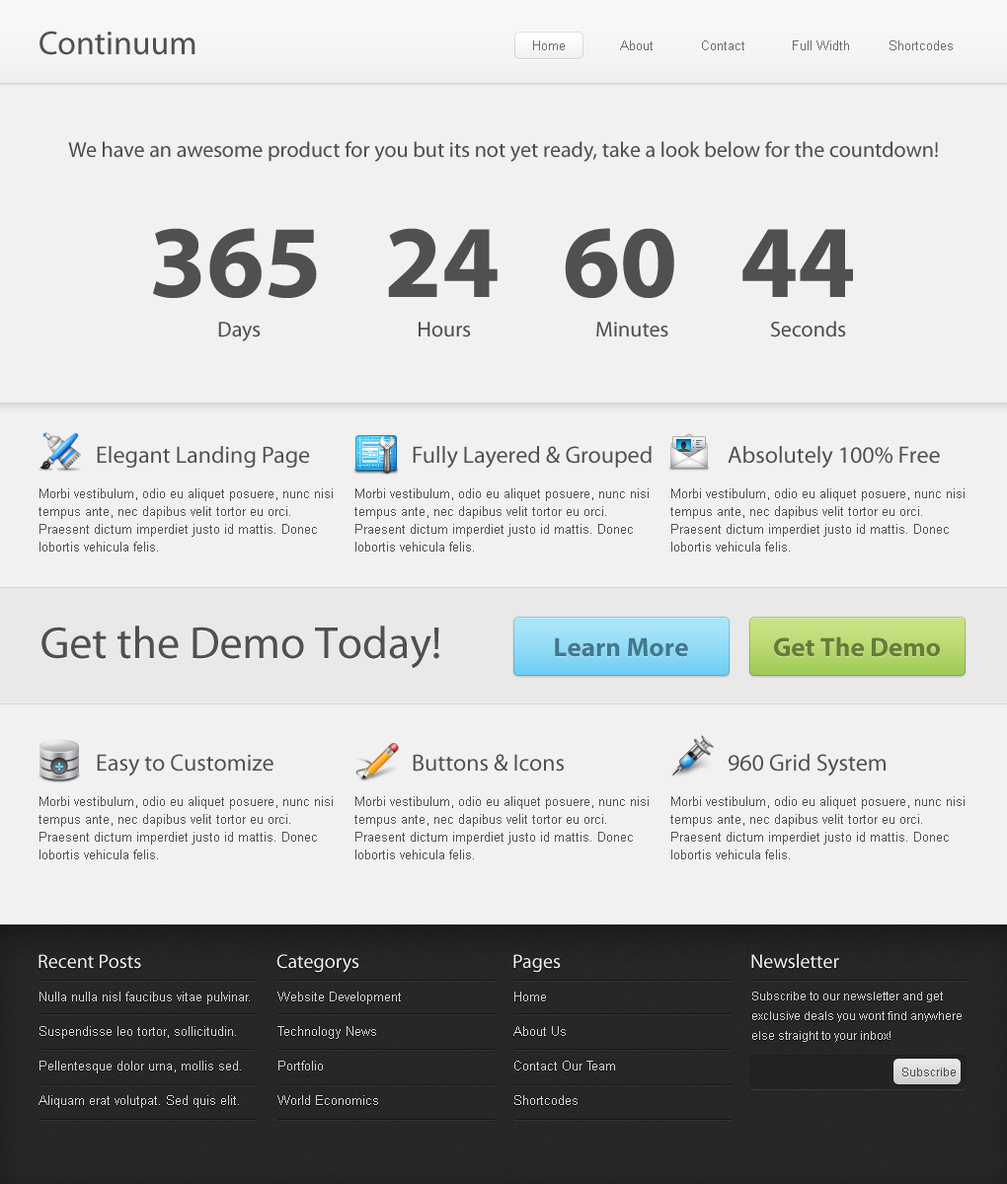
<style>
.page{position:relative;width:1007px;height:1184px;background:#f1f1f1}
.page>*{position:absolute;margin:0}
.t1{font:33.6px "MyriadPro-Regular";color:#505050}
.t2{font:12.8px "ArialMT";color:#6c6c6c}
.t3{font:21.7px "MyriadPro-Regular";color:#505050}
.t4{font:103.6px "MyriadPro-Bold";color:#505050}
.t5{font:23.7px "MyriadPro-Regular";color:#505050}
.t6{font:12.8px/17.8px "ArialMT";color:#505050}
.t7{font:45.4px "MyriadPro-Regular";color:#505050}
.t8{font:26.6px "MyriadPro-Bold";color:#42788e}
.t9{font:26.6px "MyriadPro-Bold";color:#647e38}
.t10{font:19.7px "MyriadPro-Regular";color:#f1f1f1}
.t11{font:12.8px "ArialMT";color:#d7d7d7}
.t12{font:11.8px/19.7px "ArialMT";color:#d7d7d7}
.t13{font:11.8px "ArialMT";color:#4a4a4a}
</style>
<div class="page">
<p class="t1" style="left:39px;top:31px;width:156px;height:24px">Continuum</p>
<p class="t2" style="left:533px;top:40px;width:32px;height:10px">Home</p>
<p class="t2" style="left:620px;top:40px;width:32px;height:10px">About</p>
<p class="t2" style="left:702px;top:40px;width:42px;height:10px">Contact</p>
<p class="t2" style="left:793px;top:40px;width:56px;height:10px">Full Width</p>
<p class="t2" style="left:889px;top:40px;width:63px;height:10px">Shortcodes</p>
<p class="t3" style="left:68px;top:141px;width:870px;height:21px">We have an awesome product for you but its not yet ready, take a look below for the countdown!</p>
<p class="t4" style="left:153px;top:228px;width:700px;height:70px">365   24   60   44</p>
<p class="t3" style="left:218px;top:321px;width:628px;height:21px">Days                                  Hours                           Minutes                      Seconds</p>
<p class="t5" style="left:97px;top:446px;width:213px;height:22px">Elegant Landing Page</p>
<p class="t5" style="left:413px;top:446px;width:238px;height:23px">Fully Layered &amp; Grouped</p>
<p class="t5" style="left:727px;top:446px;width:213px;height:23px">Absolutely 100% Free</p>
<p class="t6" style="left:38px;top:489px;width:295px;height:63px">Morbi vestibulum, odio eu aliquet posuere, nunc nisi tempus ante, nec dapibus velit tortor eu orci. Praesent dictum imperdiet justo id mattis. Donec lobortis vehicula felis.</p>
<p class="t6" style="left:354px;top:489px;width:294px;height:63px">Morbi vestibulum, odio eu aliquet posuere, nunc nisi tempus ante, nec dapibus velit tortor eu orci. Praesent dictum imperdiet justo id mattis. Donec lobortis vehicula felis.</p>
<p class="t6" style="left:670px;top:489px;width:294px;height:63px">Morbi vestibulum, odio eu aliquet posuere, nunc nisi tempus ante, nec dapibus velit tortor eu orci. Praesent dictum imperdiet justo id mattis. Donec lobortis vehicula felis.</p>
<p class="t7" style="left:41px;top:626px;width:398px;height:42px">Get the Demo Today!</p>
<p class="t8" style="left:555px;top:638px;width:133px;height:19px">Learn More</p>
<p class="t9" style="left:774px;top:637px;width:166px;height:20px">Get The Demo</p>
<p class="t5" style="left:97px;top:754px;width:176px;height:23px">Easy to Customize</p>
<p class="t5" style="left:413px;top:754px;width:151px;height:18px">Buttons &amp; Icons</p>
<p class="t5" style="left:728px;top:754px;width:157px;height:23px">960 Grid System</p>
<p class="t6" style="left:38px;top:797px;width:295px;height:63px">Morbi vestibulum, odio eu aliquet posuere, nunc nisi tempus ante, nec dapibus velit tortor eu orci. Praesent dictum imperdiet justo id mattis. Donec lobortis vehicula felis.</p>
<p class="t6" style="left:354px;top:797px;width:294px;height:63px">Morbi vestibulum, odio eu aliquet posuere, nunc nisi tempus ante, nec dapibus velit tortor eu orci. Praesent dictum imperdiet justo id mattis. Donec lobortis vehicula felis.</p>
<p class="t6" style="left:670px;top:797px;width:294px;height:63px">Morbi vestibulum, odio eu aliquet posuere, nunc nisi tempus ante, nec dapibus velit tortor eu orci. Praesent dictum imperdiet justo id mattis. Donec lobortis vehicula felis.</p>
<p class="t10" style="left:751px;top:953px;width:88px;height:16px">Newsletter</p>
<p class="t10" style="left:38px;top:954px;width:103px;height:15px">Recent Posts</p>
<p class="t10" style="left:276px;top:954px;width:83px;height:19px">Categorys</p>
<p class="t10" style="left:513px;top:954px;width:48px;height:19px">Pages</p>
<p class="t11" style="left:39px;top:992px;width:211px;height:13px">Nulla nulla nisl faucibus vitae pulvinar.</p>
<p class="t11" style="left:277px;top:992px;width:124px;height:13px">Website Development</p>
<p class="t11" style="left:514px;top:992px;width:32px;height:10px">Home</p>
<p class="t12" style="left:752px;top:992px;width:209px;height:50px">Subscribe to our newsletter and get exclusive deals you wont find anywhere else straight to your inbox!</p>
<p class="t11" style="left:39px;top:1027px;width:197px;height:12px">Suspendisse leo tortor, sollicitudin.</p>
<p class="t11" style="left:277px;top:1027px;width:99px;height:12px">Technology News</p>
<p class="t11" style="left:513px;top:1027px;width:53px;height:9px">About Us</p>
<p class="t11" style="left:39px;top:1061px;width:202px;height:13px">Pellentesque dolor urna, mollis sed.</p>
<p class="t11" style="left:278px;top:1061px;width:45px;height:10px">Portfolio</p>
<p class="t11" style="left:514px;top:1061px;width:101px;height:10px">Contact Our Team</p>
<p class="t13" style="left:902px;top:1068px;width:53px;height:9px">Subscribe</p>
<p class="t11" style="left:38px;top:1096px;width:201px;height:12px">Aliquam erat volutpat. Sed quis elit.</p>
<p class="t11" style="left:277px;top:1096px;width:101px;height:9px">World Economics</p>
<p class="t11" style="left:514px;top:1096px;width:63px;height:9px">Shortcodes</p>
</div>
